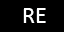
<style>
.page{position:relative;width:64px;height:32px;background:#000000}
.page>*{position:absolute;margin:0}
.t1{font:24px "Calibri";color:#feffff}
</style>
<div class="page">
<p class="t1" style="left:23px;top:8px;width:23px;height:15px">RE</p>
</div>
